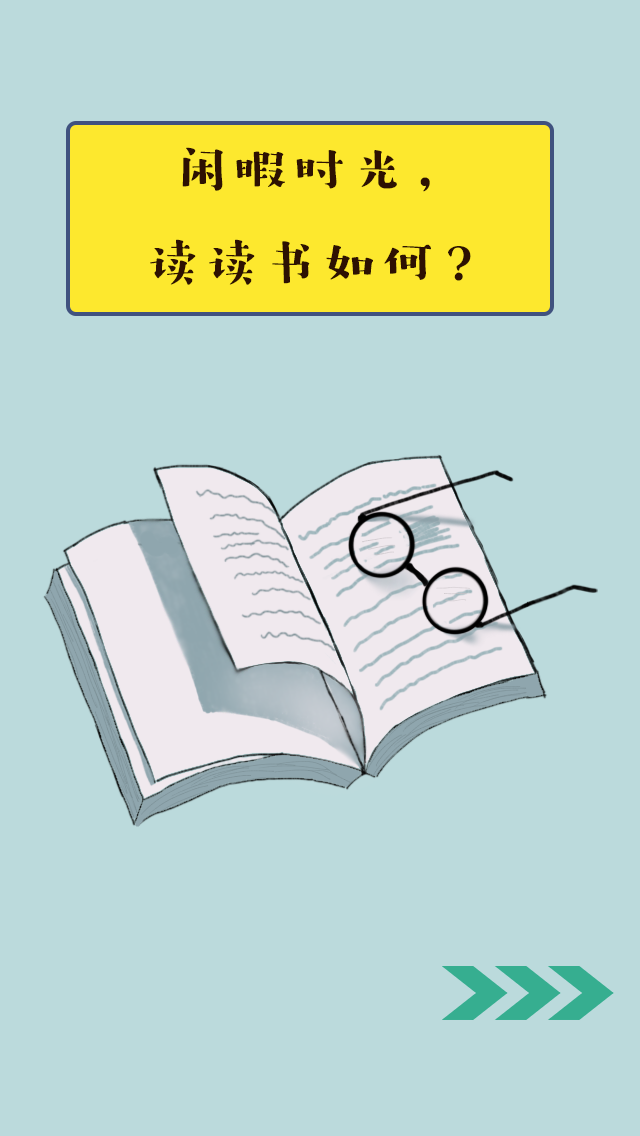
<style>
.page{position:relative;width:640px;height:1136px;background:#bbdadc}
.page>*{position:absolute;margin:0}
.t1{font:53.5px "HYZiYanHuanLeSongW";letter-spacing:0.1em;color:#2d1102}
</style>
<div class="page">
<p class="t1" style="left:150px;top:147px;width:321px;height:138px;text-align:center">闲暇时光，<br>读读书如何？</p>
</div>
